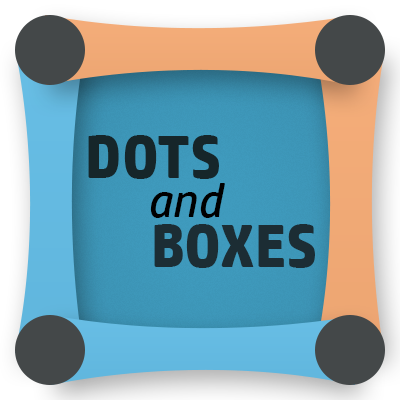
<style>
.page{position:relative;width:400px;height:400px}
.page>*{position:absolute;margin:0}
.t1{font:60px "HPSimplified-Bold";color:#16262a}
.t2{font:48px "HPSimplified-Italic";color:#000000}
.t3{font:60px "HPSimplified-Bold";color:#1c2d34}
</style>
<div class="page">
<p class="t1" style="left:88px;top:135px;width:131px;height:44px">DOTS</p>
<p class="t2" style="left:150px;top:183px;width:75px;height:35px">and</p>
<p class="t3" style="left:154px;top:224px;width:161px;height:44px">BOXES</p>
</div>
